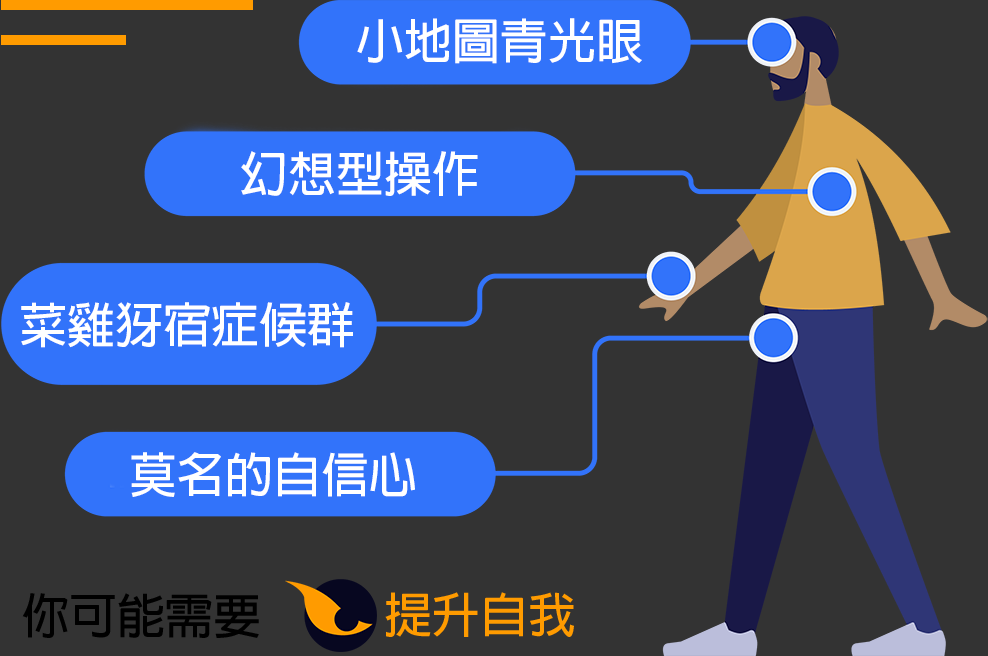
<style>
.page{position:relative;width:988px;height:656px;background:#333333}
.page>*{position:absolute;margin:0}
.t1{font:48px "AdobeFanHeitiStd-Bold";color:#ffffff}
.t2{font:48px "AdobeFanHeitiStd-Bold";color:#000000}
.t3{font:48px "AdobeFanHeitiStd-Bold";color:#ff9b00}
</style>
<div class="page">
<p class="t1" style="left:357px;top:18px;width:285px;height:46px">小地圖青光眼</p>
<p class="t1" style="left:241px;top:151px;width:237px;height:45px">幻想型操作</p>
<p class="t1" style="left:21px;top:302px;width:332px;height:46px">菜雞犽宿症候群</p>
<p class="t1" style="left:131px;top:452px;width:284px;height:45px">莫名的自信心</p>
<p class="t2" style="left:22px;top:593px;width:237px;height:45px">你可能需要</p>
<p class="t3" style="left:385px;top:592px;width:189px;height:45px">提升自我</p>
</div>
